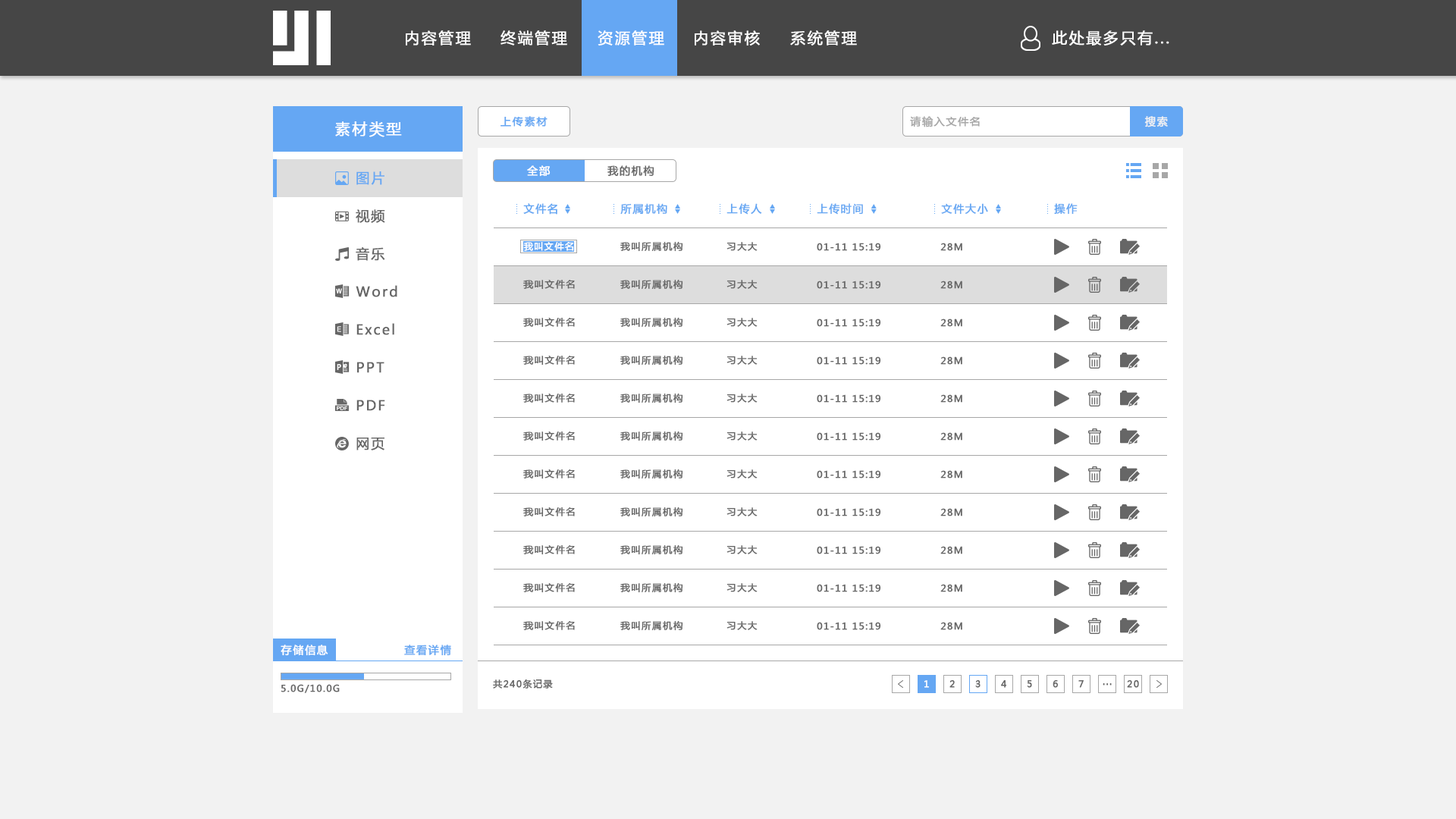
<style>
.page{position:relative;width:1456px;height:819px;background:#f2f2f2}
.page>*{position:absolute;margin:0}
.t1{font:15.2px "MicrosoftYaHei";letter-spacing:0.1em;color:#ffffff;font-weight:bold}
.t2{font:10.6px "MicrosoftYaHei";letter-spacing:0.1em;color:#65a7f3;font-weight:bold}
.t3{font:10.6px "MicrosoftYaHei";letter-spacing:0.1em;color:#a7a7a7;font-weight:bold}
.t4{font:10.6px "MicrosoftYaHei";letter-spacing:0.1em;color:#f2f2f2;font-weight:bold}
.t5{font:13.6px "MicrosoftYaHei";letter-spacing:0.1em;color:#65a7f3;font-weight:bold}
.t6{font:10.6px "MicrosoftYaHei";letter-spacing:0.1em;color:#ffffff;font-weight:bold}
.t7{font:10.6px "MicrosoftYaHei";letter-spacing:0.1em;color:#666666;font-weight:bold}
.t8{font:13.6px "MicrosoftYaHei";letter-spacing:0.1em;color:#666666;font-weight:bold}
.t9{font:10.5px "MicrosoftYaHei";letter-spacing:0.1em;color:#65a7f3;font-weight:bold}
.t10{font:9.1px "MicrosoftYaHei";letter-spacing:0.1em;color:#ffffff;font-weight:bold}
.t11{font:9.1px "MicrosoftYaHei";letter-spacing:0.1em;color:#666666;font-weight:bold}
.t12{font:9.1px "MicrosoftYaHei";letter-spacing:0.1em;color:#666666;font-weight:bold;scale:1.03 1}
.t13{font:9px "MicrosoftYaHei";letter-spacing:0.1em;color:#666666;font-weight:bold}
</style>
<div class="page">
<p class="t1" style="left:406px;top:30px;width:65px;height:15px">内容管理</p>
<p class="t1" style="left:500px;top:30px;width:67px;height:15px">终端管理</p>
<p class="t1" style="left:598px;top:30px;width:66px;height:15px">资源管理</p>
<p class="t1" style="left:695px;top:30px;width:65px;height:15px">内容审核</p>
<p class="t1" style="left:790px;top:30px;width:67px;height:15px">系统管理</p>
<p class="t1" style="left:1052px;top:30px;width:117px;height:15px">此处最多只有...</p>
<p class="t1" style="left:335px;top:121px;width:67px;height:16px">素材类型</p>
<p class="t2" style="left:500px;top:116px;width:48px;height:11px">上传素材</p>
<p class="t3" style="left:910px;top:116px;width:70px;height:11px">请输入文件名</p>
<p class="t4" style="left:1144px;top:116px;width:24px;height:11px">搜索</p>
<p class="t5" style="left:356px;top:171px;width:28px;height:14px">图片</p>
<p class="t6" style="left:527px;top:165px;width:24px;height:12px">全部</p>
<p class="t7" style="left:607px;top:165px;width:47px;height:12px">我的机构</p>
<p class="t8" style="left:356px;top:209px;width:29px;height:14px">视频</p>
<p class="t2" style="left:523px;top:203px;width:34px;height:12px">文件名</p>
<p class="t9" style="left:620px;top:203px;width:47px;height:12px">所属机构</p>
<p class="t9" style="left:726px;top:203px;width:36px;height:12px">上传人</p>
<p class="t9" style="left:817px;top:203px;width:46px;height:12px">上传时间</p>
<p class="t9" style="left:941px;top:203px;width:47px;height:12px">文件大小</p>
<p class="t2" style="left:1054px;top:203px;width:24px;height:12px">操作</p>
<p class="t10" style="left:523px;top:242px;width:51px;height:9px">我叫文件名</p>
<p class="t11" style="left:620px;top:241px;width:63px;height:11px">我叫所属机构</p>
<p class="t11" style="left:726px;top:242px;width:32px;height:9px">习大大</p>
<p class="t11" style="left:817px;top:243px;width:64px;height:8px">01-11 15:19</p>
<p class="t11" style="left:940px;top:243px;width:22px;height:8px">28M</p>
<p class="t8" style="left:356px;top:247px;width:29px;height:14px">音乐</p>
<p class="t12" style="left:523px;top:280px;width:52px;height:10px">我叫文件名</p>
<p class="t11" style="left:620px;top:279px;width:63px;height:11px">我叫所属机构</p>
<p class="t11" style="left:726px;top:280px;width:32px;height:9px">习大大</p>
<p class="t11" style="left:817px;top:281px;width:64px;height:8px">01-11 15:19</p>
<p class="t11" style="left:940px;top:281px;width:22px;height:8px">28M</p>
<p class="t8" style="left:356px;top:285px;width:41px;height:12px">Word</p>
<p class="t12" style="left:523px;top:318px;width:52px;height:10px">我叫文件名</p>
<p class="t11" style="left:620px;top:317px;width:63px;height:11px">我叫所属机构</p>
<p class="t11" style="left:726px;top:318px;width:32px;height:9px">习大大</p>
<p class="t8" style="left:356px;top:323px;width:38px;height:12px">Excel</p>
<p class="t11" style="left:817px;top:318px;width:64px;height:9px">01-11 15:19</p>
<p class="t11" style="left:940px;top:318px;width:22px;height:9px">28M</p>
<p class="t8" style="left:357px;top:362px;width:27px;height:11px">PPT</p>
<p class="t12" style="left:523px;top:356px;width:52px;height:10px">我叫文件名</p>
<p class="t11" style="left:620px;top:355px;width:63px;height:11px">我叫所属机构</p>
<p class="t11" style="left:726px;top:356px;width:32px;height:9px">习大大</p>
<p class="t11" style="left:817px;top:356px;width:64px;height:9px">01-11 15:19</p>
<p class="t11" style="left:940px;top:356px;width:22px;height:9px">28M</p>
<p class="t8" style="left:356px;top:400px;width:29px;height:11px">PDF</p>
<p class="t12" style="left:523px;top:394px;width:52px;height:9px">我叫文件名</p>
<p class="t11" style="left:620px;top:393px;width:63px;height:10px">我叫所属机构</p>
<p class="t11" style="left:726px;top:394px;width:32px;height:9px">习大大</p>
<p class="t11" style="left:817px;top:394px;width:64px;height:9px">01-11 15:19</p>
<p class="t11" style="left:940px;top:394px;width:22px;height:9px">28M</p>
<p class="t8" style="left:356px;top:438px;width:28px;height:12px">网页</p>
<p class="t12" style="left:523px;top:431px;width:52px;height:10px">我叫文件名</p>
<p class="t11" style="left:620px;top:431px;width:63px;height:10px">我叫所属机构</p>
<p class="t11" style="left:726px;top:431px;width:32px;height:10px">习大大</p>
<p class="t11" style="left:817px;top:432px;width:64px;height:9px">01-11 15:19</p>
<p class="t11" style="left:940px;top:432px;width:22px;height:9px">28M</p>
<p class="t12" style="left:523px;top:469px;width:52px;height:10px">我叫文件名</p>
<p class="t11" style="left:620px;top:469px;width:63px;height:10px">我叫所属机构</p>
<p class="t11" style="left:726px;top:469px;width:32px;height:10px">习大大</p>
<p class="t11" style="left:817px;top:470px;width:64px;height:9px">01-11 15:19</p>
<p class="t11" style="left:940px;top:470px;width:22px;height:9px">28M</p>
<p class="t12" style="left:523px;top:507px;width:52px;height:10px">我叫文件名</p>
<p class="t11" style="left:620px;top:507px;width:63px;height:10px">我叫所属机构</p>
<p class="t11" style="left:726px;top:507px;width:32px;height:9px">习大大</p>
<p class="t11" style="left:817px;top:508px;width:64px;height:8px">01-11 15:19</p>
<p class="t11" style="left:940px;top:508px;width:22px;height:8px">28M</p>
<p class="t12" style="left:523px;top:545px;width:52px;height:10px">我叫文件名</p>
<p class="t11" style="left:620px;top:544px;width:63px;height:11px">我叫所属机构</p>
<p class="t11" style="left:726px;top:545px;width:32px;height:9px">习大大</p>
<p class="t11" style="left:817px;top:546px;width:64px;height:8px">01-11 15:19</p>
<p class="t11" style="left:940px;top:546px;width:22px;height:8px">28M</p>
<p class="t12" style="left:523px;top:583px;width:52px;height:10px">我叫文件名</p>
<p class="t11" style="left:620px;top:582px;width:63px;height:11px">我叫所属机构</p>
<p class="t11" style="left:726px;top:583px;width:32px;height:9px">习大大</p>
<p class="t11" style="left:817px;top:584px;width:64px;height:8px">01-11 15:19</p>
<p class="t11" style="left:940px;top:584px;width:22px;height:8px">28M</p>
<p class="t12" style="left:523px;top:621px;width:52px;height:10px">我叫文件名</p>
<p class="t11" style="left:620px;top:620px;width:63px;height:11px">我叫所属机构</p>
<p class="t11" style="left:726px;top:621px;width:32px;height:9px">习大大</p>
<p class="t11" style="left:817px;top:622px;width:64px;height:8px">01-11 15:19</p>
<p class="t11" style="left:940px;top:622px;width:22px;height:8px">28M</p>
<p class="t6" style="left:281px;top:645px;width:47px;height:11px">存储信息</p>
<p class="t2" style="left:404px;top:645px;width:47px;height:11px">查看详情</p>
<p class="t13" style="left:281px;top:684px;width:59px;height:9px">5.0G/10.0G</p>
<p class="t11" style="left:493px;top:679px;width:60px;height:10px">共240条记录</p>
<p class="t10" style="left:924px;top:680px;width:5px;height:8px">1</p>
<p class="t11" style="left:949px;top:680px;width:6px;height:8px">2</p>
<p class="t11" style="left:975px;top:680px;width:6px;height:8px">3</p>
<p class="t11" style="left:1001px;top:680px;width:6px;height:8px">4</p>
<p class="t11" style="left:1027px;top:680px;width:5px;height:8px">5</p>
<p class="t11" style="left:1053px;top:680px;width:5px;height:8px">6</p>
<p class="t11" style="left:1078px;top:680px;width:6px;height:8px">7</p>
<p class="t11" style="left:1103px;top:683px;width:9px;height:3px">...</p>
<p class="t11" style="left:1127px;top:680px;width:12px;height:8px">20</p>
</div>
